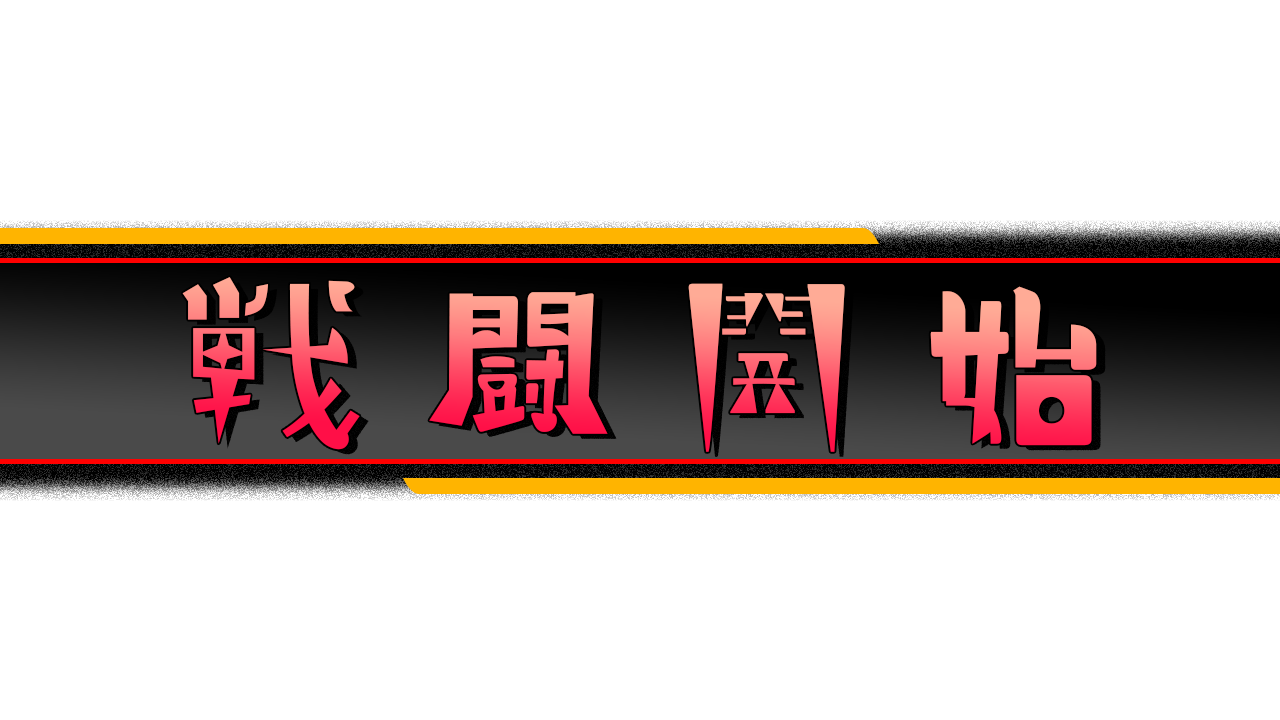
<style>
.page{position:relative;width:1280px;height:720px;background:#ffffff}
.page>*{position:absolute;margin:0}
.t1{font:183.3px "pigmo-01"}
</style>
<div class="page">
<p class="t1" style="left:182px;top:277px;width:915px;height:175px">戦 闘 開 始</p>
</div>
